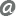
<style>
.page{position:relative;width:16px;height:16px;background:#6e7271}
.page>*{position:absolute;margin:0}
.t1{font:25px "Cabin-Regular";color:#6e7271}
</style>
<div class="page">
<p class="t1" style="left:0px;top:0px;width:16px;height:16px">@</p>
</div>
